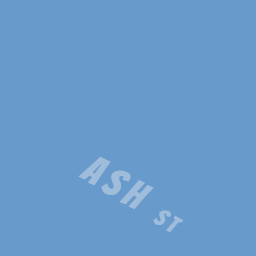
<style>
.page{position:relative;width:256px;height:256px;background:#689bcb}
.page>*{position:absolute;margin:0}
.t1{font:40px "Bangers-Regular";letter-spacing:0.16em;color:#9fbddb}
.t2{font:24px "Bangers-Regular";letter-spacing:0.16em;color:#9fbddb}
</style>
<div class="page">
<p class="t1" style="left:78px;top:156px;width:106px;height:76px;rotate:31deg">ASH <span class="t2">ST</span></p>
</div>
